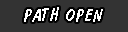
<style>
.page{position:relative;width:128px;height:32px;background:#333333}
.page>*{position:absolute;margin:0}
.t1{font:18px "DomDiagonalBT-Regular";letter-spacing:0.05em;color:#ffffff}
</style>
<div class="page">
<p class="t1" style="left:24px;top:7px;width:79px;height:15px">PATH OPEN</p>
</div>
